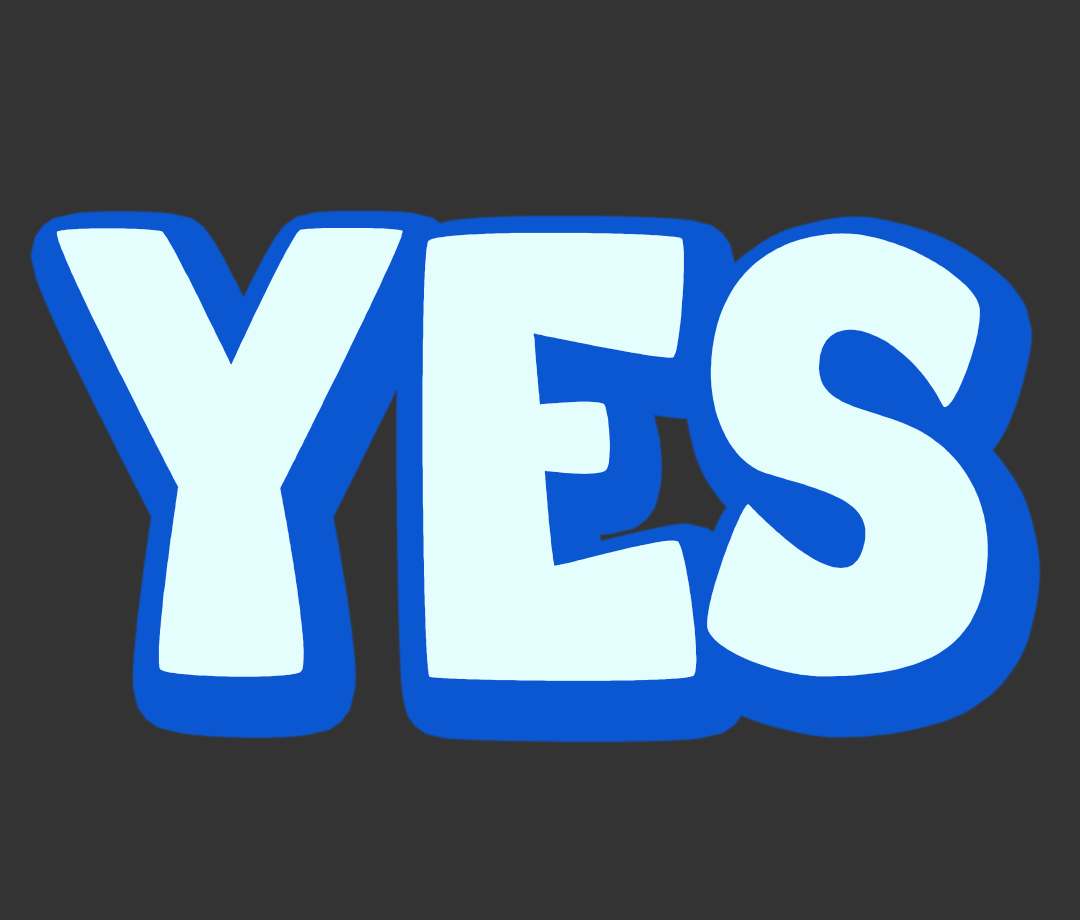
<style>
.page{position:relative;width:1080px;height:920px;background:#333333}
.page>*{position:absolute;margin:0}
.t1{font:377.6px "Big_Bottom_Cartoon";letter-spacing:-0.005em;color:#e4fdfd}
</style>
<div class="page">
<p class="t1" style="left:56px;top:228px;width:932px;height:453px">YES</p>
</div>
